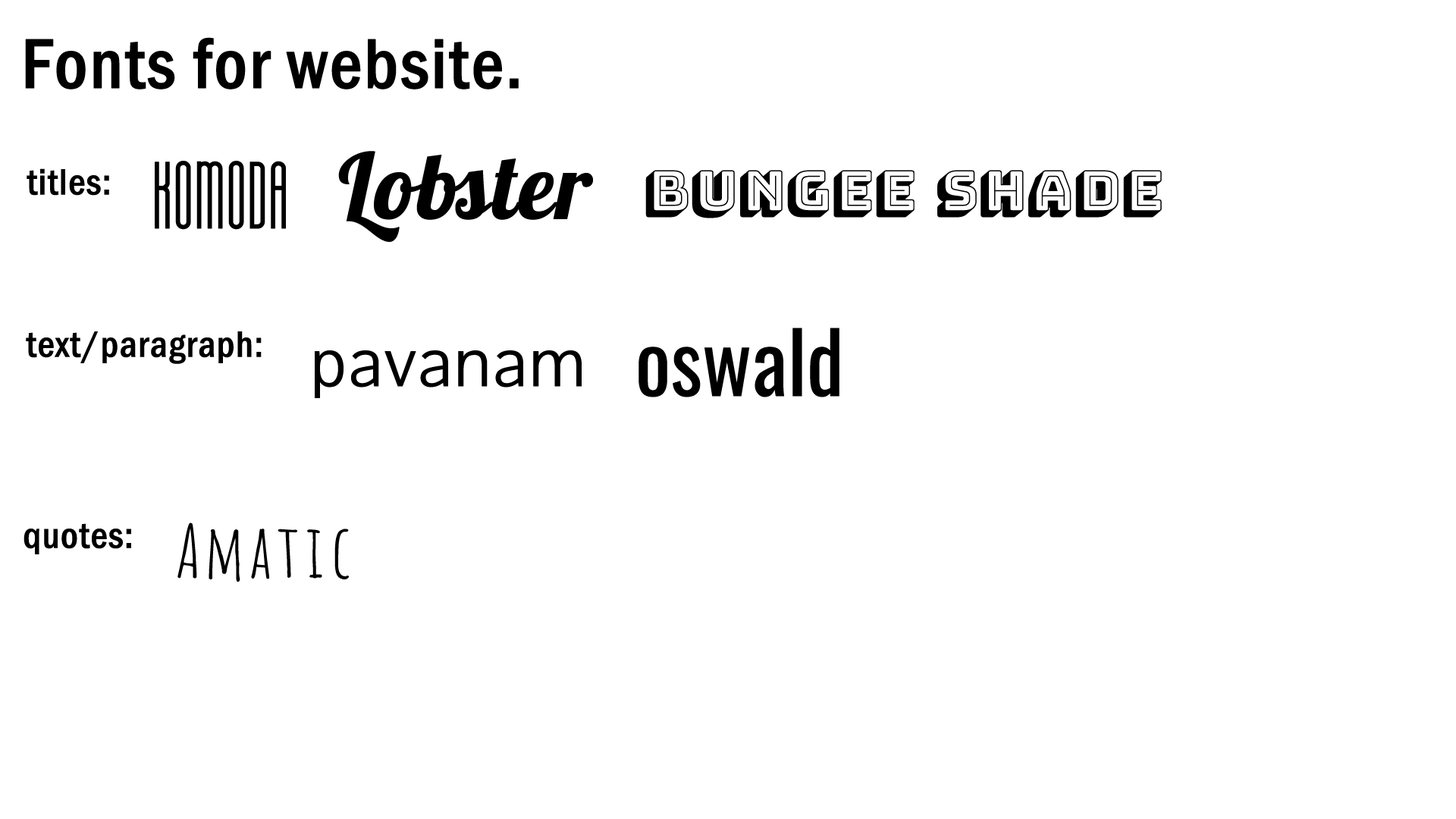
<style>
.page{position:relative;width:1456px;height:819px;background:#ffffff}
.page>*{position:absolute;margin:0}
.t1{font:72.8px "FranklinGothic-MediumCond";color:#000000;font-weight:bold}
.t2{font:91px "Komoda-Regular";color:#000000;font-weight:bold}
.t3{font:91px "Lobster1.4";color:#000000;font-weight:bold}
.t4{font:37.9px "FranklinGothic-MediumCond";color:#000000;font-weight:bold}
.t5{font:54.6px "BungeeShade-Regular";color:#000000;font-weight:bold}
.t6{font:84.1px "Oswald-Regular";color:#000000}
.t7{font:72.8px "Pavanam-Regular";color:#000000;font-weight:bold}
.t8{font:72.8px "Amatic";color:#000000;font-weight:bold}
</style>
<div class="page">
<p class="t1" style="left:25px;top:37px;width:494px;height:52px">Fonts for website.</p>
<p class="t2" style="left:155px;top:161px;width:131px;height:69px">Komoda</p>
<p class="t3" style="left:338px;top:151px;width:255px;height:91px">Lobster</p>
<p class="t4" style="left:27px;top:168px;width:82px;height:28px">titles:</p>
<p class="t5" style="left:645px;top:170px;width:517px;height:48px">Bungee shade</p>
<p class="t6" style="left:639px;top:328px;width:200px;height:69px">oswald</p>
<p class="t4" style="left:26px;top:331px;width:236px;height:33px">text/paragraph:</p>
<p class="t7" style="left:315px;top:350px;width:267px;height:48px">pavanam</p>
<p class="t4" style="left:24px;top:523px;width:107px;height:31px">quotes:</p>
<p class="t8" style="left:177px;top:522px;width:172px;height:60px">Amatic</p>
</div>
